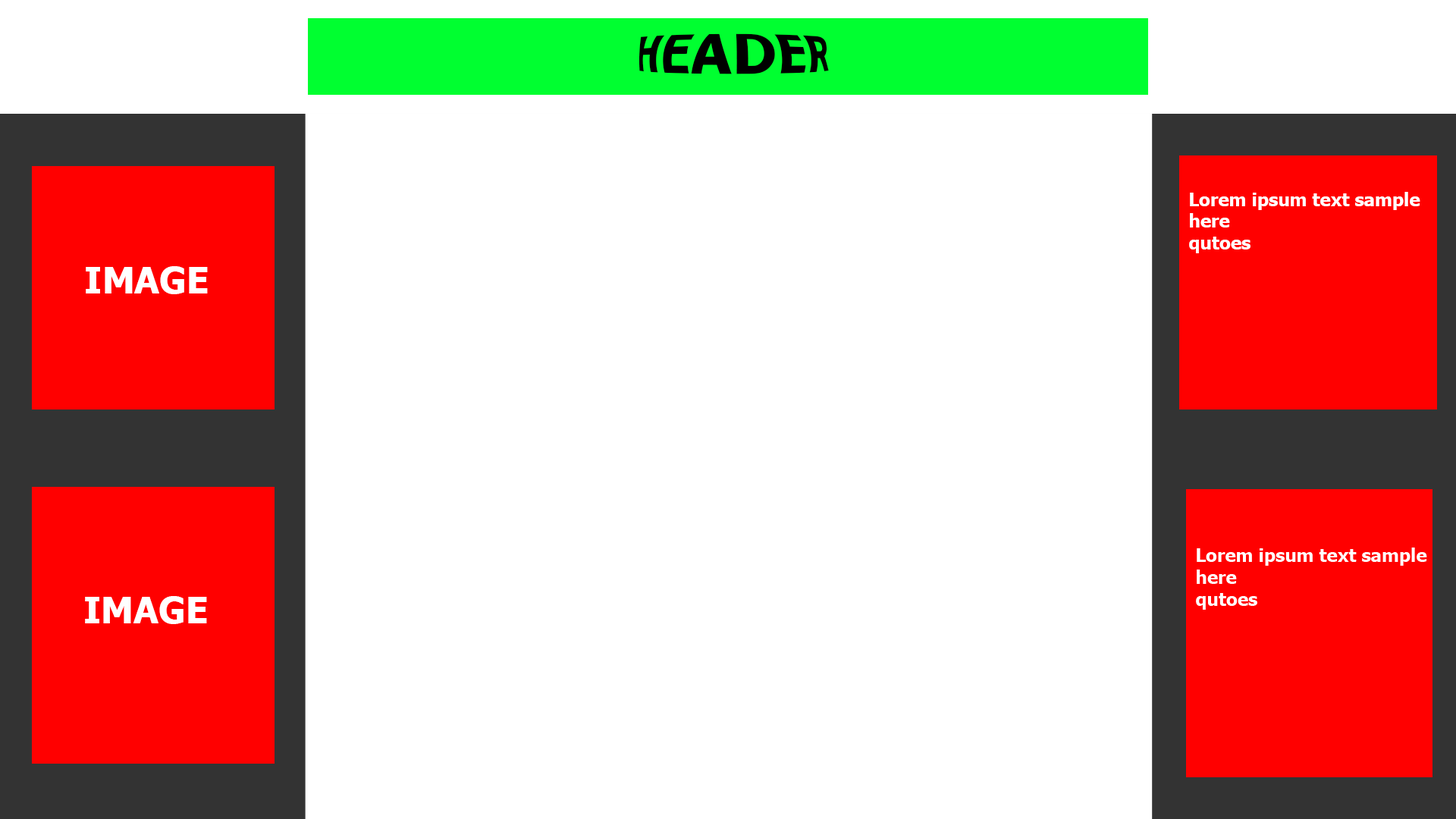
<style>
.page{position:relative;width:1456px;height:819px;background:#ffffff}
.page>*{position:absolute;margin:0}
.t1{font:45.5px "Tahoma-Bold";color:#000000}
.t2{font:18.2px "Tahoma-Bold";color:#ffffff}
.t3{font:36.4px "Tahoma-Bold";color:#ffffff}
</style>
<div class="page">
<p class="t1" style="left:639px;top:33px;width:190px;height:41px">HEADER</p>
<p class="t2" style="left:1189px;top:192px;width:231px;height:61px">Lorem ipsum text sample<br>here<br>qutoes</p>
<p class="t3" style="left:86px;top:266px;width:122px;height:28px">IMAGE</p>
<p class="t3" style="left:85px;top:596px;width:122px;height:28px">IMAGE</p>
</div>
